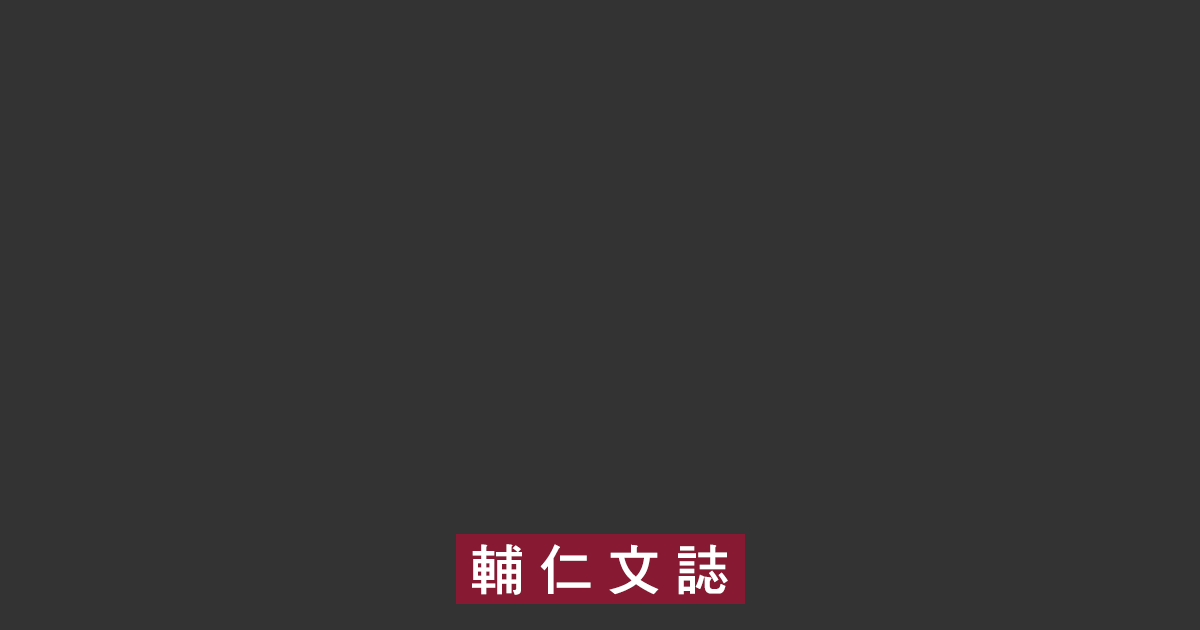
<style>
.page{position:relative;width:1200px;height:630px;background:#333333}
.page>*{position:absolute;margin:0}
.t1{font:54.6px "DFHei-Bd-HK-BF";letter-spacing:0.26em;color:#ffffff}
</style>
<div class="page">
<p class="t1" style="left:472px;top:544px;width:256px;height:51px">輔仁文誌</p>
</div>
